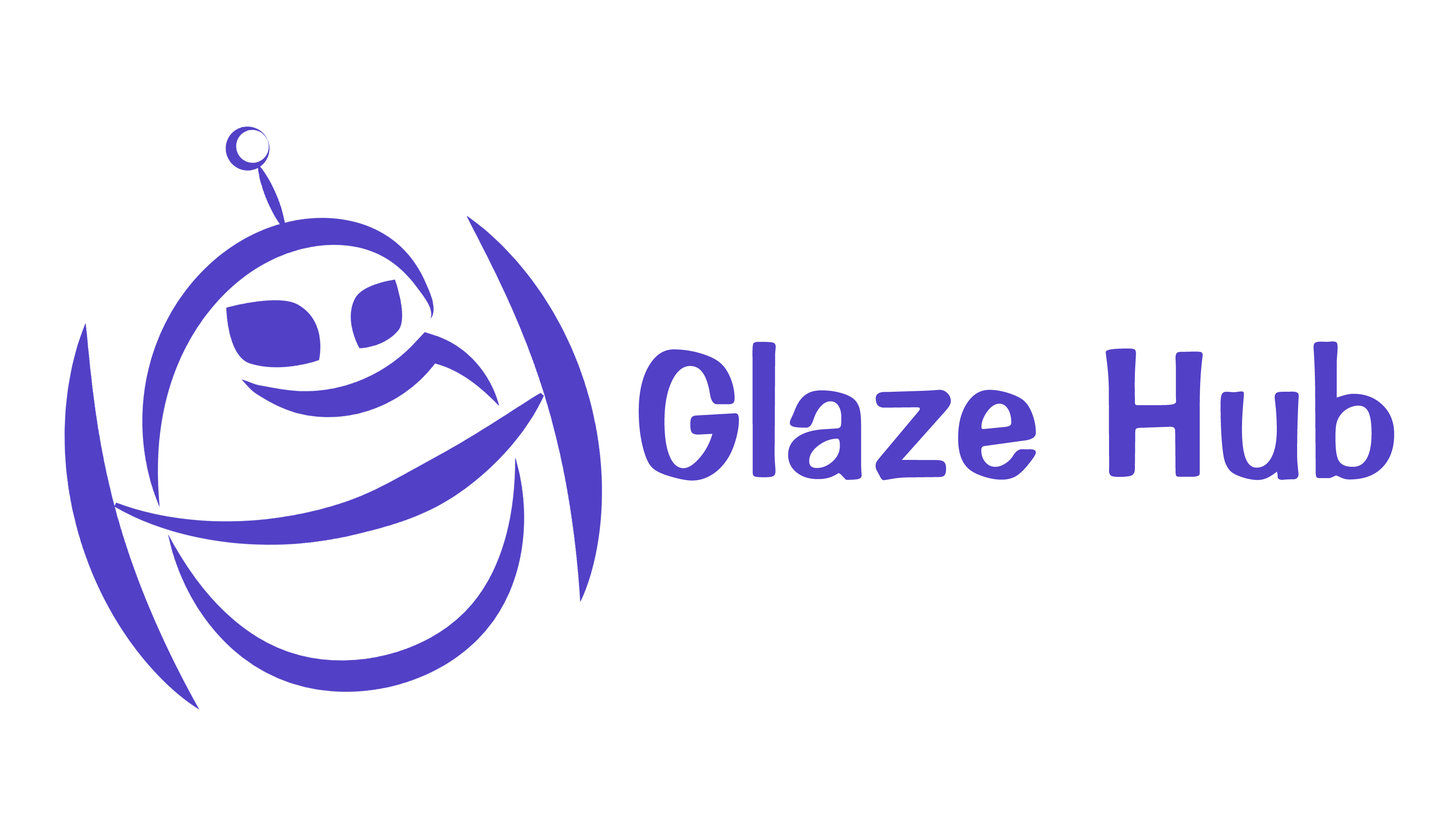
<style>
.page{position:relative;width:1431px;height:833px;background:#ffffff}
.page>*{position:absolute;margin:0}
.t1{font:180.5px "ImpressBT-Regular";color:#5240c6}
</style>
<div class="page">
<p class="t1" style="left:638px;top:341px;width:756px;height:140px">Glaze Hub</p>
</div>
